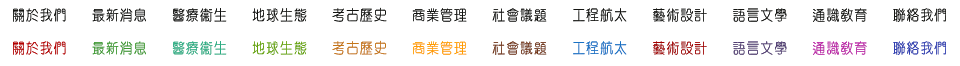
<style>
.page{position:relative;width:960px;height:66px;background:#ffffff}
.page>*{position:absolute;margin:0}
.t1{font:14.9px "¥þ¯u²Ó¶êÅé";letter-spacing:0.025em;color:#131411;scale:0.91 1}
.t2{font:14.9px "¥þ¯u²Ó¶êÅé";letter-spacing:0.025em;color:#b50000;scale:0.91 1}
.t3{font:14.9px "¥þ¯u²Ó¶êÅé";letter-spacing:0.025em;color:#3f9a33;scale:0.91 1}
.t4{font:14.9px "¥þ¯u²Ó¶êÅé";letter-spacing:0.025em;color:#2bac83;scale:0.91 1}
.t5{font:14.9px "¥þ¯u²Ó¶êÅé";letter-spacing:0.025em;color:#74b410;scale:0.91 1}
.t6{font:14.9px "¥þ¯u²Ó¶êÅé";letter-spacing:0.025em;color:#c47619;scale:0.91 1}
.t7{font:14.9px "¥þ¯u²Ó¶êÅé";letter-spacing:0.025em;color:#ffab00;scale:0.91 1}
.t8{font:14.9px "¥þ¯u²Ó¶êÅé";letter-spacing:0.025em;color:#733719;scale:0.91 1}
.t9{font:14.9px "¥þ¯u²Ó¶êÅé";letter-spacing:0.025em;color:#1972c4;scale:0.91 1}
.t10{font:14.9px "¥þ¯u²Ó¶êÅé";letter-spacing:0.025em;color:#a10000;scale:0.91 1}
.t11{font:14.9px "¥þ¯u²Ó¶êÅé";letter-spacing:0.025em;color:#513d72;scale:0.91 1}
.t12{font:14.9px "¥þ¯u²Ó¶êÅé";letter-spacing:0.025em;color:#ba21a6;scale:0.91 1}
.t13{font:14.9px "¥þ¯u²Ó¶êÅé";letter-spacing:0.025em;color:#2f3eb0;scale:0.91 1}
.t14{font:14.9px "¥þ¯u²Ó¶êÅé";letter-spacing:0.025em;color:#67a20a;scale:0.91 1}
.t15{font:14.9px "¥þ¯u²Ó¶êÅé";letter-spacing:0.025em;color:#ff9c00;scale:0.91 1}
</style>
<div class="page">
<p class="t1" style="left:13px;top:7px;width:933px;height:15px">關於我們   最新消息   醫療衛生   地球生態   考古歷史   商業管理   社會議題   工程航太   藝術設計   語言文學   通識教育   聯絡我們</p>
<p class="t1" style="left:13px;top:7px;width:933px;height:15px">關於我們   最新消息   醫療衛生   地球生態   考古歷史   商業管理   社會議題   工程航太   藝術設計   語言文學   通識教育   聯絡我們</p>
<p class="t2" style="left:13px;top:40px;width:933px;height:15px">關於我們   <span class="t3">最新消息   </span><span class="t4">醫療衛生   </span><span class="t5">地球生態   </span><span class="t6">考古歷史   </span><span class="t7">商業管理   </span><span class="t8">社會議題   </span><span class="t9">工程航太   </span><span class="t10">藝術設計   </span><span class="t11">語言文學   </span><span class="t12">通識教育   </span><span class="t13">聯絡我們</span></p>
<p class="t2" style="left:13px;top:40px;width:933px;height:15px">關於我們   <span class="t3">最新消息   </span><span class="t4">醫療衛生   </span><span class="t14">地球生態   </span><span class="t6">考古歷史   </span><span class="t15">商業管理   </span><span class="t8">社會議題   </span><span class="t9">工程航太   </span><span class="t10">藝術設計   </span><span class="t11">語言文學   </span><span class="t12">通識教育   </span><span class="t13">聯絡我們</span></p>
</div>
